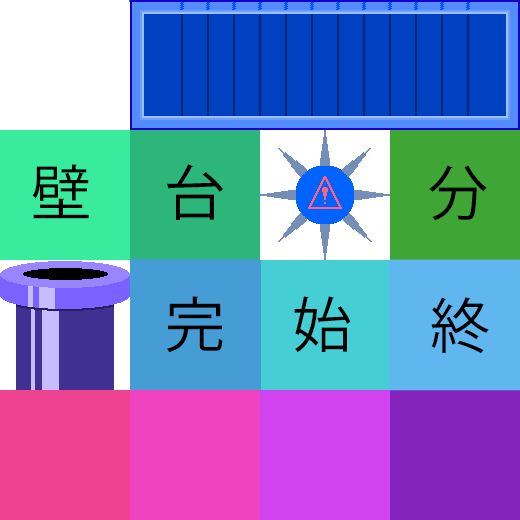
<style>
.page{position:relative;width:520px;height:520px}
.page>*{position:absolute;margin:0}
.t1{font:60px "KozGoPr6N-Regular";color:#000000}
</style>
<div class="page">
<p class="t1" style="left:32px;top:164px;width:57px;height:55px">壁</p>
<p class="t1" style="left:167px;top:164px;width:56px;height:56px">台</p>
<p class="t1" style="left:429px;top:165px;width:58px;height:56px">分</p>
<p class="t1" style="left:166px;top:296px;width:57px;height:57px">完</p>
<p class="t1" style="left:294px;top:296px;width:57px;height:57px">始</p>
<p class="t1" style="left:431px;top:297px;width:58px;height:57px">終</p>
</div>
